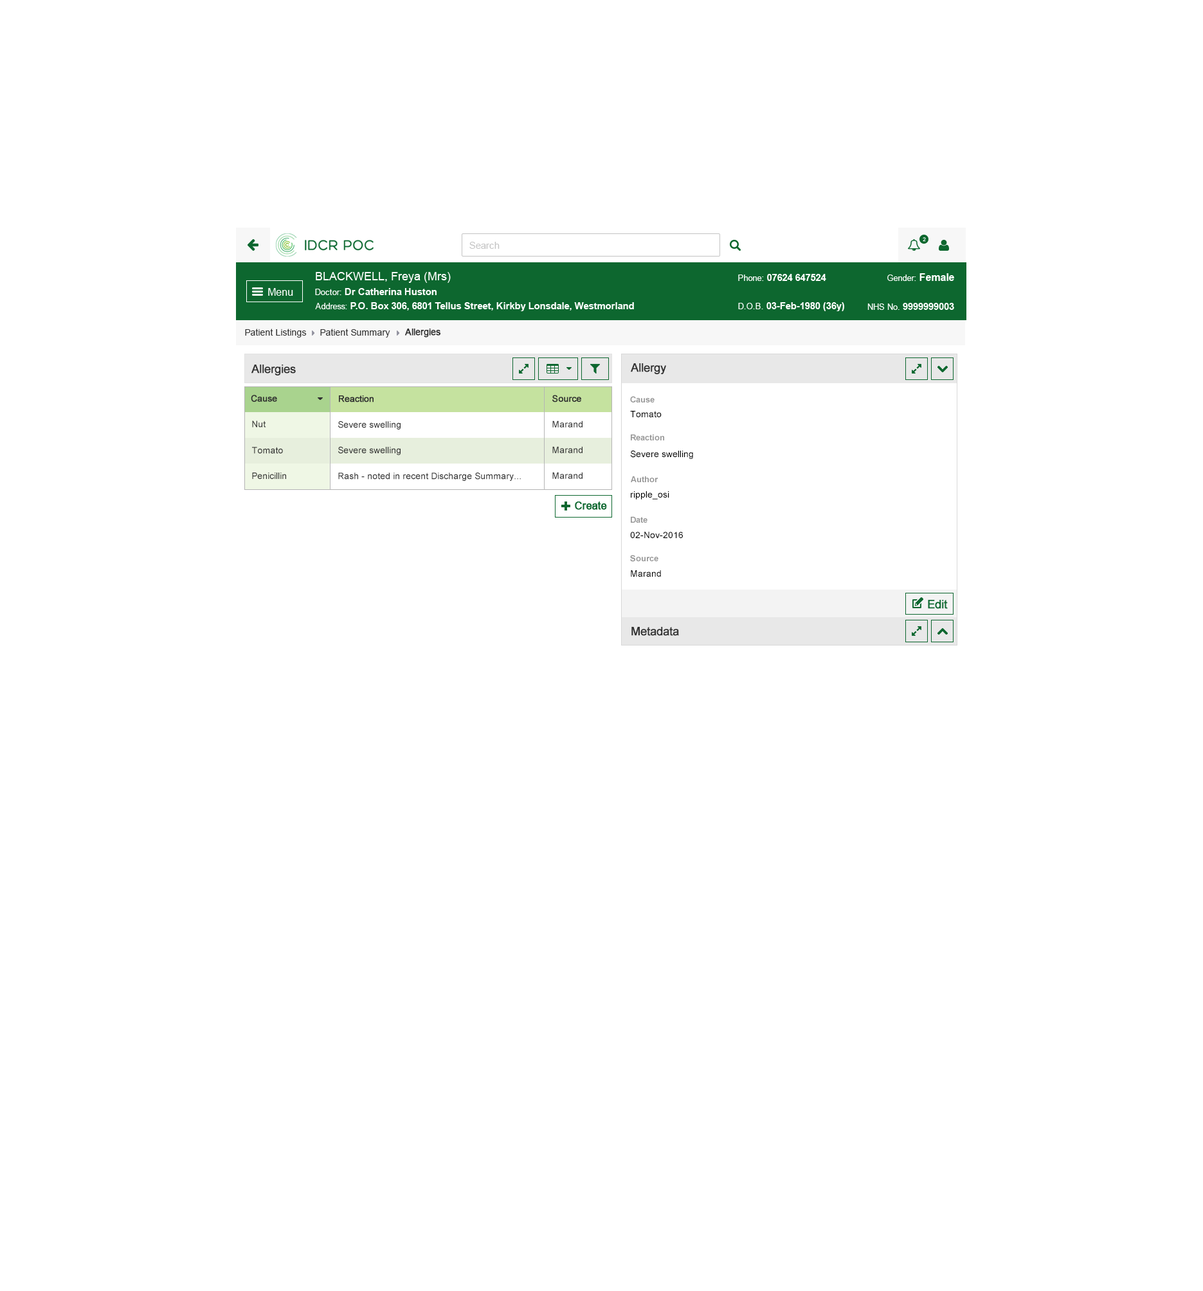
<style>
.page{position:relative;width:1203px;height:1291px;background:#ffffff}
.page>*{position:absolute;margin:0}
.t1{font:9px "ArialMT";color:#313131}
.t2{font:9px "ArialMT";color:#313131;font-weight:bold}
.t3{font:11.6px "ArialMT";color:#303030;font-weight:bold}
.t4{font:9px "ArialMT";color:#303030;font-weight:bold}
.t5{font:8.4px "Arial-BoldMT";color:#959595}
.t6{font:9px "ArialMT";color:#000000}
.t7{font:9px "ArialMT";color:#303030}
</style>
<div class="page">
<p class="t1" style="left:245px;top:328px;width:62px;height:10px">Patient Listings</p>
<p class="t1" style="left:320px;top:328px;width:70px;height:10px">Patient Summary</p>
<p class="t2" style="left:405px;top:328px;width:35px;height:10px">Allergies</p>
<p class="t3" style="left:251px;top:364px;width:45px;height:11px">Allergies</p>
<p class="t3" style="left:631px;top:363px;width:35px;height:11px">Allergy</p>
<p class="t4" style="left:251px;top:395px;width:26px;height:7px">Cause</p>
<p class="t4" style="left:339px;top:395px;width:35px;height:7px">Reaction</p>
<p class="t4" style="left:552px;top:395px;width:29px;height:7px">Source</p>
<p class="t5" style="left:630px;top:396px;width:24px;height:6px">Cause</p>
<p class="t6" style="left:630px;top:411px;width:32px;height:6px">Tomato</p>
<p class="t7" style="left:252px;top:420px;width:14px;height:8px">Nut</p>
<p class="t7" style="left:338px;top:421px;width:63px;height:8px">Severe swelling</p>
<p class="t7" style="left:552px;top:420px;width:30px;height:8px">Marand</p>
<p class="t5" style="left:631px;top:434px;width:33px;height:6px">Reaction</p>
<p class="t7" style="left:252px;top:447px;width:31px;height:7px">Tomato</p>
<p class="t7" style="left:338px;top:446px;width:63px;height:9px">Severe swelling</p>
<p class="t7" style="left:552px;top:446px;width:30px;height:7px">Marand</p>
<p class="t6" style="left:630px;top:450px;width:63px;height:9px">Severe swelling</p>
<p class="t7" style="left:252px;top:473px;width:34px;height:6px">Penicillin</p>
<p class="t7" style="left:338px;top:473px;width:183px;height:8px">Rash - noted in recent Discharge Summary...</p>
<p class="t7" style="left:552px;top:472px;width:30px;height:7px">Marand</p>
<p class="t5" style="left:631px;top:476px;width:27px;height:6px">Author</p>
<p class="t6" style="left:631px;top:491px;width:38px;height:9px">ripple_osi</p>
<p class="t5" style="left:631px;top:516px;width:16px;height:7px">Date</p>
<p class="t6" style="left:630px;top:532px;width:53px;height:6px">02-Nov-2016</p>
<p class="t5" style="left:630px;top:555px;width:28px;height:7px">Source</p>
<p class="t6" style="left:631px;top:570px;width:30px;height:7px">Marand</p>
<p class="t3" style="left:631px;top:627px;width:48px;height:9px">Metadata</p>
</div>
